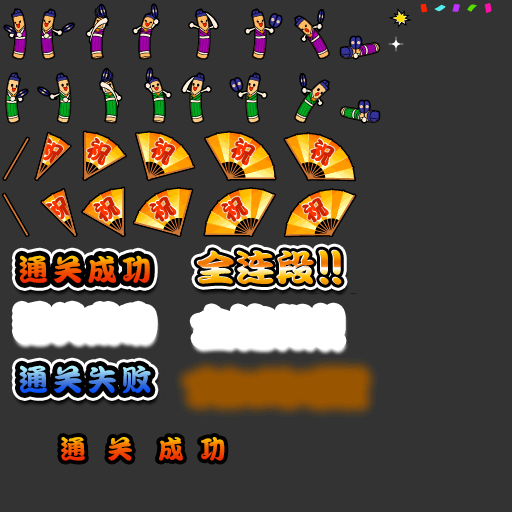
<style>
.page{position:relative;width:512px;height:512px;background:#333333}
.page>*{position:absolute;margin:0}
.t1{font:30px "DFPKanTingLiuW9";letter-spacing:0.15em}
.t2{font:36.4px "DFPKanTingLiuW9";scale:1.09 1}
.t3{font:50px "DFPKanTingLiuW9";letter-spacing:-0.1em;scale:1.09 1}
.t4{font:26px "DFPKanTingLiuW9"}
</style>
<div class="page">
<p class="t1" style="left:19px;top:255px;width:131px;height:28px">通关成功</p>
<p class="t2" style="left:196px;top:249px;width:145px;height:35px">全连段<span class="t3">!!</span></p>
<p class="t2" style="left:197px;top:250px;width:145px;height:35px">全连段<span class="t3">!!</span></p>
<p class="t1" style="left:19px;top:365px;width:132px;height:28px">通关失败</p>
<p class="t4" style="left:61px;top:437px;width:24px;height:24px">通</p>
<p class="t4" style="left:108px;top:437px;width:24px;height:24px">关</p>
<p class="t4" style="left:159px;top:437px;width:24px;height:24px">成</p>
<p class="t4" style="left:201px;top:437px;width:24px;height:24px">功</p>
</div>
